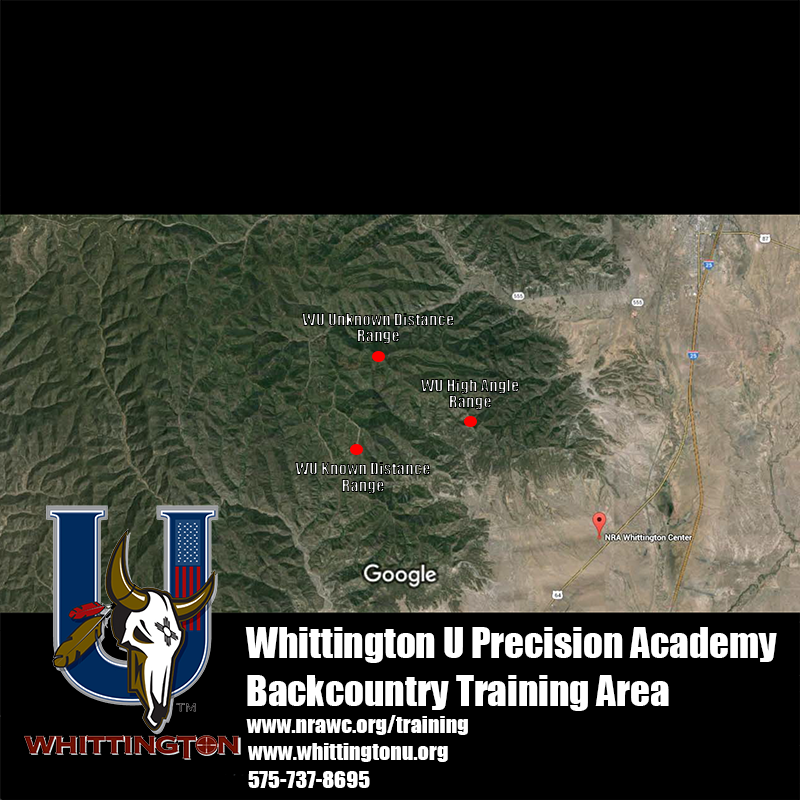
<style>
.page{position:relative;width:800px;height:800px;background:#000000}
.page>*{position:absolute;margin:0}
.t1{font:16.7px/16.7px "Impact"}
.t2{font:38.9px "Impact";color:#ffffff}
.t3{font:22.2px "Impact";color:#ffffff}
</style>
<div class="page">
<p class="t1" style="left:301px;top:313px;width:153px;height:31px;text-align:center">WU Unknown Distance<br>Range</p>
<p class="t1" style="left:420px;top:379px;width:99px;height:31px;text-align:center">WU High Angle<br>Range</p>
<p class="t2" style="left:245px;top:627px;width:532px;height:36px">Whittington U Precision Academy</p>
<p class="t2" style="left:247px;top:675px;width:422px;height:36px">Backcountry Training Area</p>
<p class="t3" style="left:246px;top:715px;width:222px;height:20px">www.nrawc.org/training</p>
<p class="t3" style="left:248px;top:743px;width:200px;height:19px">www.whittingtonu.org</p>
<p class="t3" style="left:248px;top:771px;width:122px;height:17px">575-737-8695</p>
</div>
